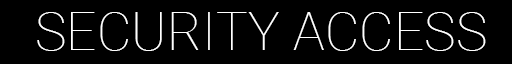
<style>
.page{position:relative;width:512px;height:64px;background:#000000}
.page>*{position:absolute;margin:0}
.t1{font:53.3px "Roboto-Thin";color:#ffffff;text-transform:uppercase}
</style>
<div class="page">
<p class="t1" style="left:37px;top:12px;width:449px;height:39px">Security Access</p>
</div>
